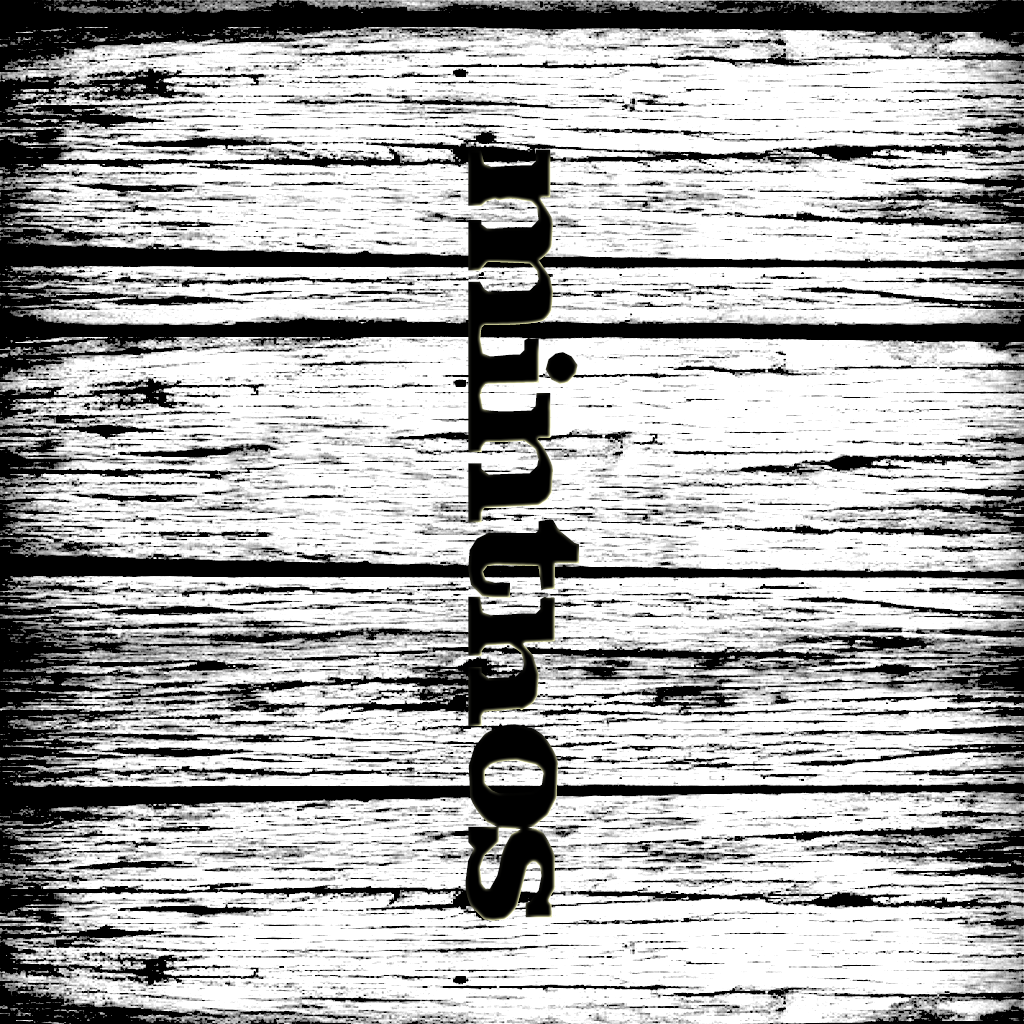
<style>
.page{position:relative;width:1024px;height:1024px;background:#ffffff}
.page>*{position:absolute;margin:0}
.t1{font:141.7px "FontosCrude";letter-spacing:-0.02em;color:#000000}
</style>
<div class="page">
<p class="t1" style="left:465px;top:149px;width:114px;height:772px;rotate:90deg">minthos</p>
</div>
